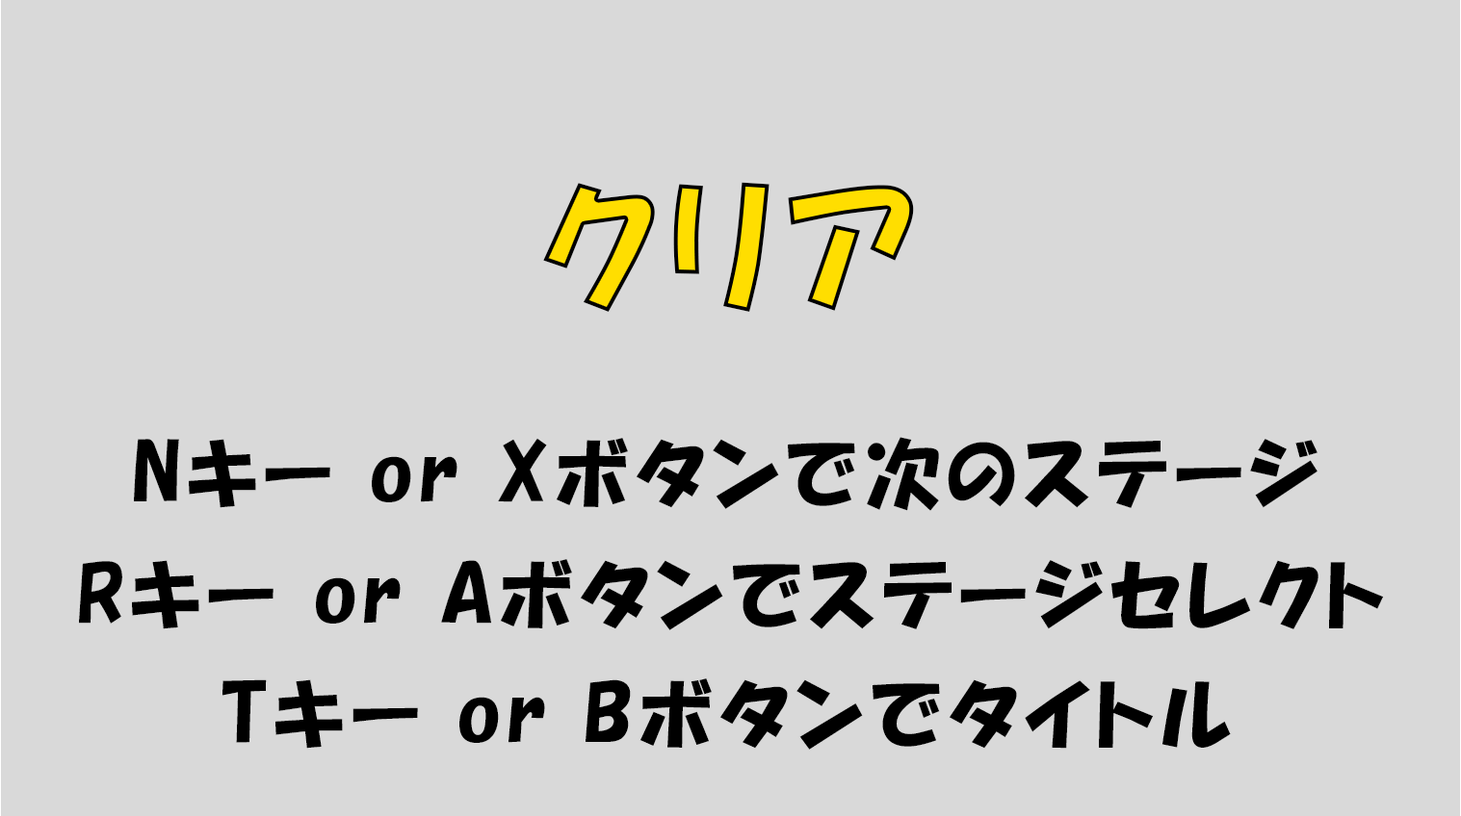
<style>
.page{position:relative;width:1461px;height:816px;background:#d9d9d9}
.page>*{position:absolute;margin:0}
.t1{font:144.4px "HGPSoeiKakupoptai";letter-spacing:0.08em;color:#ffde00}
.t2{font:77px "HGPSoeiKakupoptai";letter-spacing:0.08em;color:#000000}
</style>
<div class="page">
<p class="t1" style="left:543px;top:182px;width:371px;height:130px">クリア</p>
<p class="t2" style="left:134px;top:437px;width:1183px;height:74px">Nキー or Xボタンで次のステージ</p>
<p class="t2" style="left:79px;top:559px;width:1305px;height:72px">Rキー or Aボタンでステージセレクト</p>
<p class="t2" style="left:222px;top:679px;width:1008px;height:71px">Tキー or Bボタンでタイトル</p>
</div>
